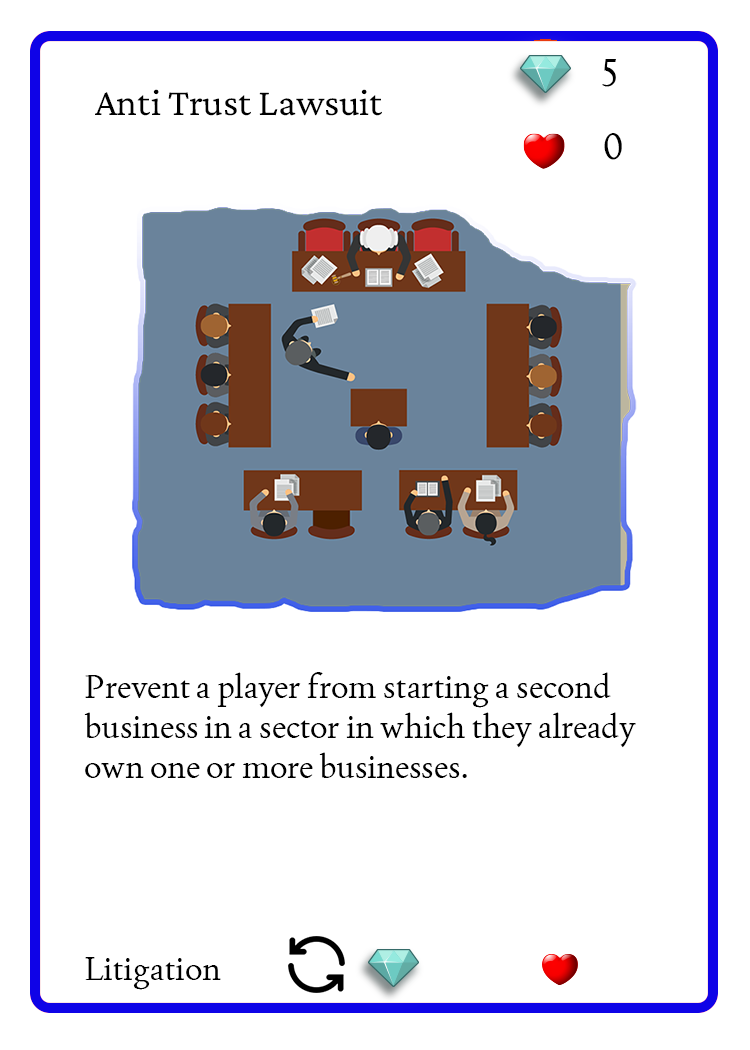
<style>
.page{position:relative;width:750px;height:1050px;background:#ffffff}
.page>*{position:absolute;margin:0}
.t1{font:37.5px "Joan-Regular";color:#000000;text-transform:uppercase}
.t2{font:38.9px "CrimsonPro-Regular";color:#000000}
.t3{font:33.3px "Joan-Regular";color:#000000}
</style>
<div class="page">
<p class="t1" style="left:602px;top:59px;width:14px;height:28px">5</p>
<p class="t2" style="left:95px;top:89px;width:287px;height:27px">Anti Trust Lawsuit</p>
<p class="t1" style="left:604px;top:133px;width:18px;height:27px">0</p>
<p class="t3" style="left:84px;top:672px;width:552px;height:106px">Prevent a player from starting a second business in a sector in which they already own one or more businesses.</p>
<p class="t3" style="left:85px;top:957px;width:136px;height:33px">Litigation</p>
</div>
